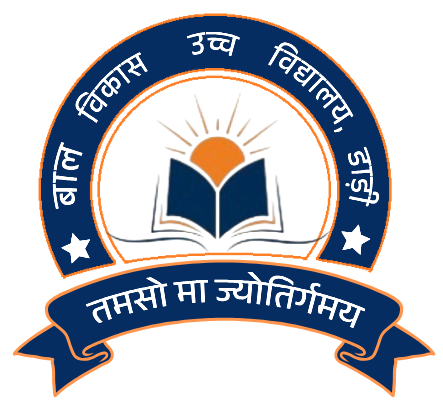
<style>
.page{position:relative;width:443px;height:413px;background:#ffffff}
.page>*{position:absolute;margin:0}
.t1{font:32.5px "AnekDevanagari-Medium";letter-spacing:0.06em;color:#ffffff;scale:0.82 1}
.t2{font:37.4px "AnekDevanagari-Medium";letter-spacing:0.075em;color:#ffffff;scale:0.82 1}
.t3{font:35px "AnekDevanagari-Medium";color:#ffffff}
</style>
<div class="page">
<p class="t1" style="left:186px;top:32px;width:54px;height:24px;rotate:2deg">उच्च</p>
<p class="t1" style="left:75px;top:52px;width:73px;height:71px;rotate:-43deg">विकास</p>
<p class="t1" style="left:268px;top:42px;width:86px;height:91px;rotate:44deg">विद्यालय,</p>
<p class="t2" style="left:52px;top:142px;width:31px;height:67px;rotate:-82deg">बाल</p>
<p class="t1" style="left:345px;top:146px;width:35px;height:61px;rotate:89deg">डाड़ी</p>
<p class="t3" style="left:85px;top:272px;width:281px;height:56px;rotate:1deg">तमसो मा ज्योतिर्गमय​</p>
</div>
